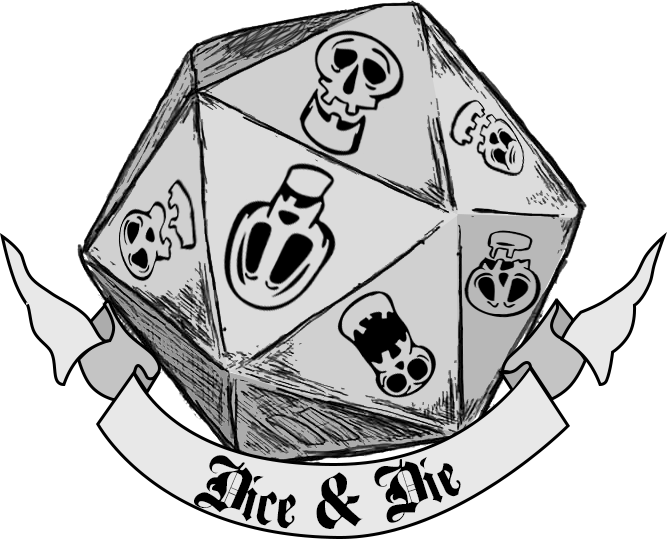
<style>
.page{position:relative;width:667px;height:542px;background:#ffffff}
.page>*{position:absolute;margin:0}
.t1{font:75px "Beckett-KanzleiCYRegular";color:#000000}
</style>
<div class="page">
<p class="t1" style="left:194px;top:455px;width:267px;height:74px">Dice &amp; Die</p>
</div>
